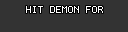
<style>
.page{position:relative;width:128px;height:32px;background:#333333}
.page>*{position:absolute;margin:0}
.t1{font:8px "Terminal";color:#ffffff}
</style>
<div class="page">
<p class="t1" style="left:26px;top:6px;width:77px;height:7px">HIT DEMON FOR</p>
</div>
